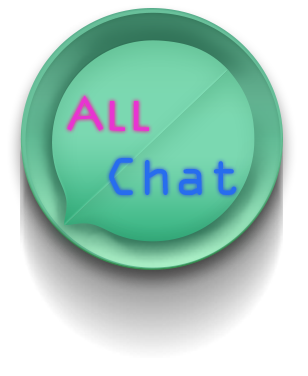
<style>
.page{position:relative;width:308px;height:376px;background:#ffffff}
.page>*{position:absolute;margin:0}
.t1{font:48px "LithosPro-Regular";color:#e834d1}
.t2{font:48px "OCRAStd";color:#276dee}
</style>
<div class="page">
<p class="t1" style="left:67px;top:95px;width:82px;height:36px">All</p>
<p class="t2" style="left:109px;top:158px;width:128px;height:37px">Chat</p>
</div>
